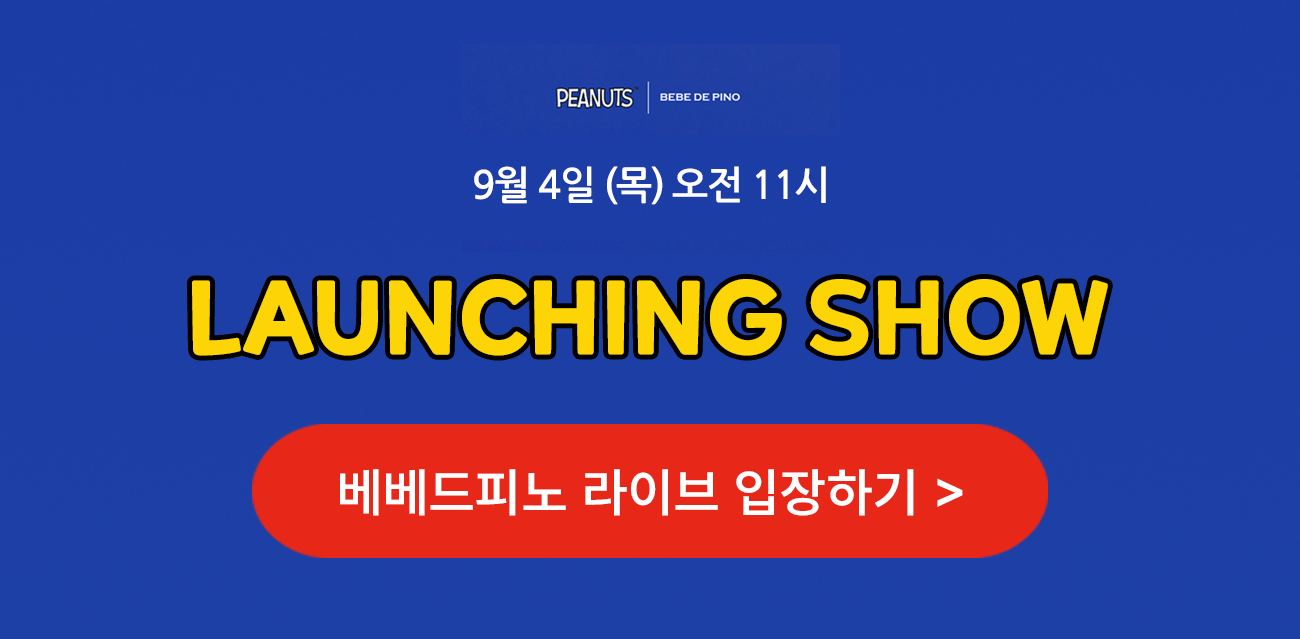
<style>
.page{position:relative;width:1300px;height:639px}
.page>*{position:absolute;margin:0}
.t1{font:38.5px "NanumGothicOTFBold";letter-spacing:-0.04em;color:#ffffff}
.t2{font:98.9px "ONEMobilePOPOTFRegular";color:#fdd507}
.t3{font:52.5px "Pretendard-SemiBold";letter-spacing:0.02em;color:#ffffff}
</style>
<div class="page">
<p class="t1" style="left:474px;top:166px;width:352px;height:39px">9월 4일 (목) 오전 11시</p>
<p class="t2" style="left:192px;top:279px;width:916px;height:77px">LAUNCHING SHOW</p>
<p class="t3" style="left:340px;top:469px;width:623px;height:47px">베베드피노 라이브 입장하기 &gt;</p>
</div>
